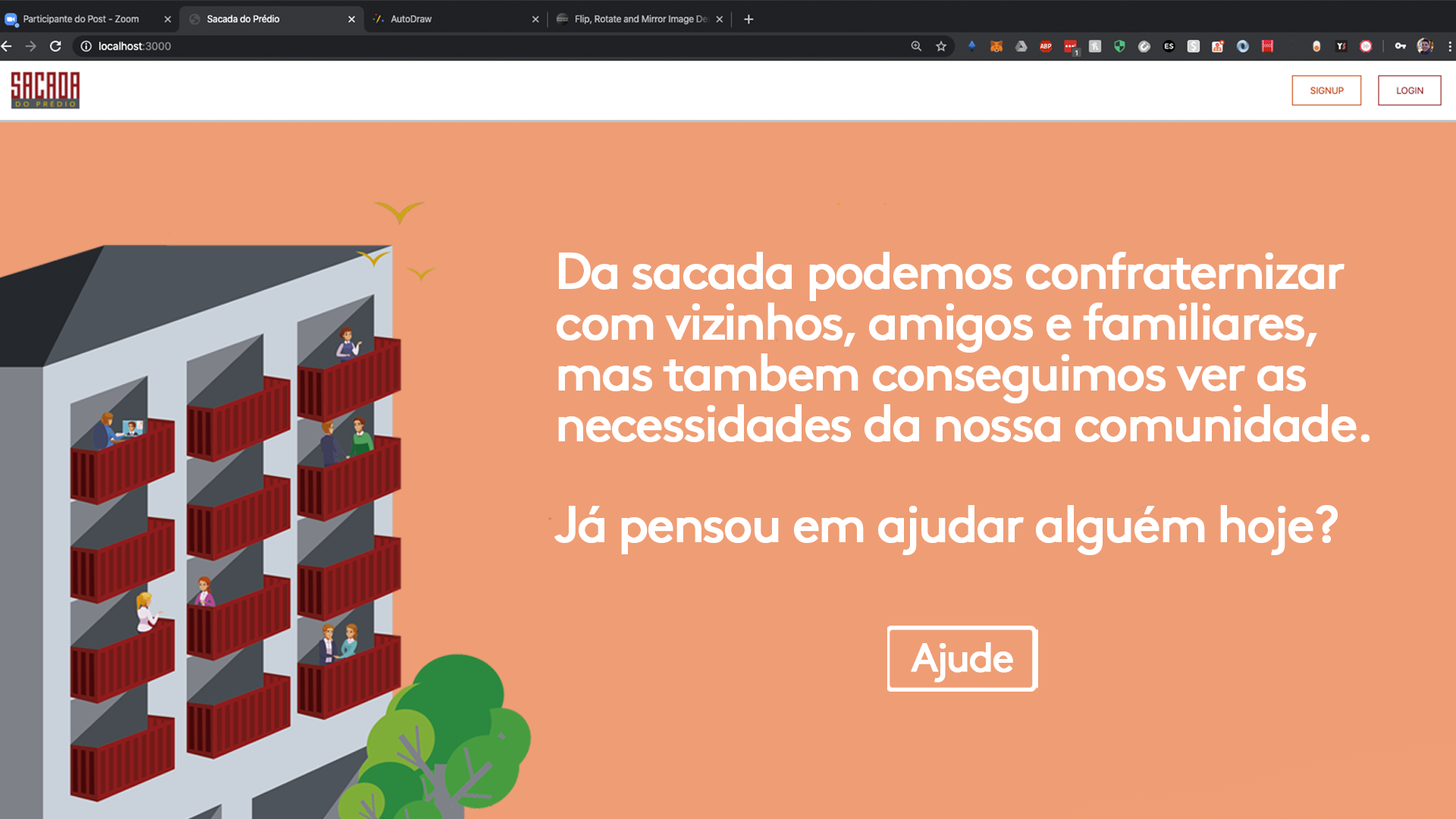
<style>
.page{position:relative;width:1456px;height:819px;background:#ef9d74}
.page>*{position:absolute;margin:0}
.t1{font:50.8px/50.7px "Brown-Regular";letter-spacing:-0.06em;color:#ffffff;font-weight:bold}
.t2{font:40.4px "Brown-Regular";letter-spacing:-0.06em;color:#ffffff;font-weight:bold}
</style>
<div class="page">
<p class="t1" style="left:554px;top:252px;width:816px;height:303px">Da sacada podemos confraternizar<br>com vizinhos, amigos e familiares,<br>mas tambem conseguimos ver as <br>necessidades da nossa comunidade.<br><br>Já pensou em ajudar alguém hoje?</p>
<p class="t2" style="left:911px;top:642px;width:102px;height:40px">Ajude</p>
</div>
